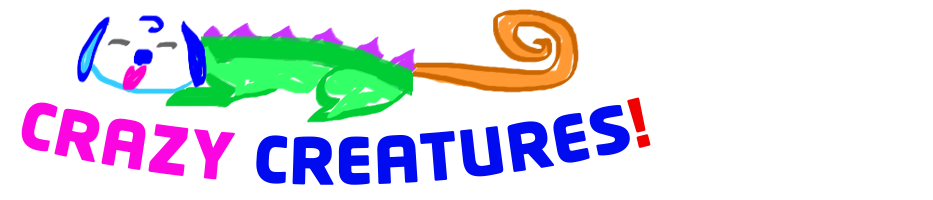
<style>
.page{position:relative;width:933px;height:200px;background:#ffffff}
.page>*{position:absolute;margin:0}
.t1{font:64px "NeoTechPro-Black";color:#000bf0}
.t2{font:64px "NeoTechPro-Black";color:#fb06e1}
.t3{font:64px "NeoTechPro-Black";color:#f00000}
</style>
<div class="page">
<p class="t1" style="left:21px;top:97px;width:630px;height:88px"><span class="t2">CRAZY </span>CREATURES<span class="t3">!</span></p>
</div>
